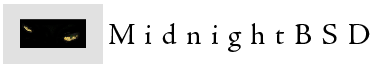
<style>
.page{position:relative;width:374px;height:69px;background:#ffffff}
.page>*{position:absolute;margin:0}
.t1{font:30px "AJensonPro-Regular";letter-spacing:0.32em;color:#000000}
</style>
<div class="page">
<p class="t1" style="left:109px;top:23px;width:261px;height:29px">MidnightBSD</p>
</div>
